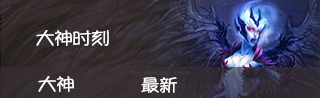
<style>
.page{position:relative;width:320px;height:98px}
.page>*{position:absolute;margin:0}
.t1{font:18px "YuppySC-Regular";letter-spacing:-0.08em;color:#fdfcfc;scale:1.11 1}
</style>
<div class="page">
<p class="t1" style="left:36px;top:30px;width:73px;height:17px">大神时刻</p>
<p class="t1" style="left:38px;top:76px;width:36px;height:17px">大神</p>
<p class="t1" style="left:141px;top:77px;width:36px;height:16px">最新</p>
</div>
